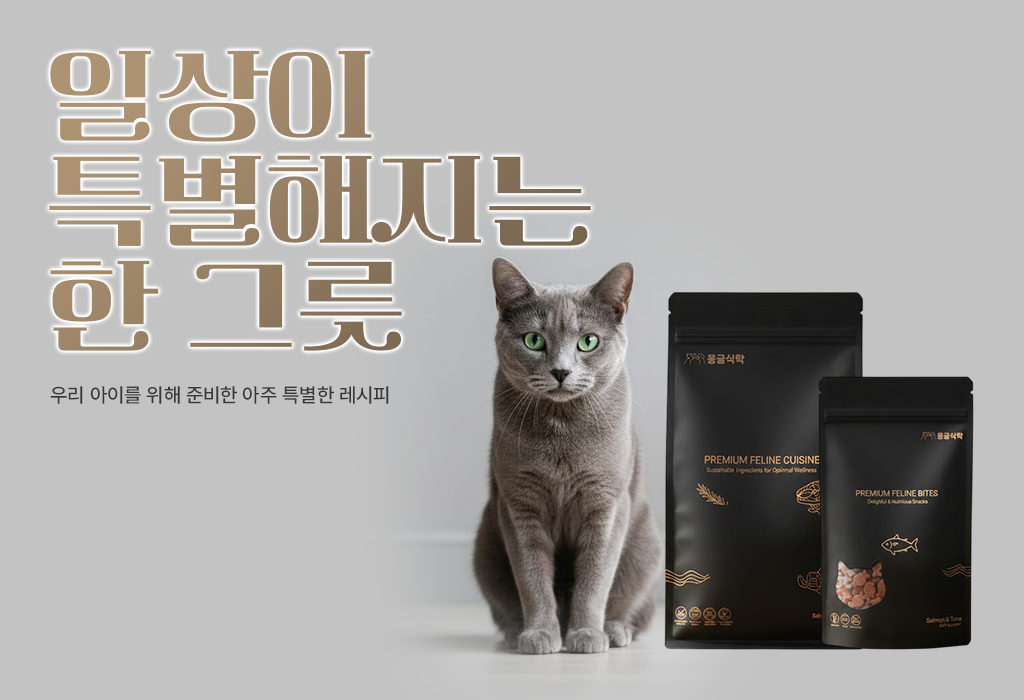
<style>
.page{position:relative;width:1024px;height:700px;background:#c3c3c3}
.page>*{position:absolute;margin:0}
.t1{font:110px/105px "Cafe24ClassicType-Regular";color:#aa8768;text-transform:uppercase}
.t2{font:20px "Pretendard-Medium";color:#373737;text-transform:uppercase}
</style>
<div class="page">
<p class="t1" style="left:49px;top:50px;width:542px;height:301px">일상이 <br>특별해지는 <br>한 그릇</p>
<p class="t2" style="left:50px;top:386px;width:339px;height:18px">우리 아이를 위해 준비한 아주 특별한 레시피</p>
</div>
